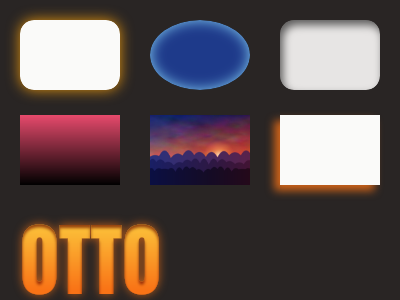
<style>
.page{position:relative;width:400px;height:300px;background:#292524}
.page>*{position:absolute;margin:0}
.t1{font:80px "Anton-Regular"}
</style>
<div class="page">
<p class="t1" style="left:17px;top:197px;width:366px;height:103px">OTTO</p>
</div>
